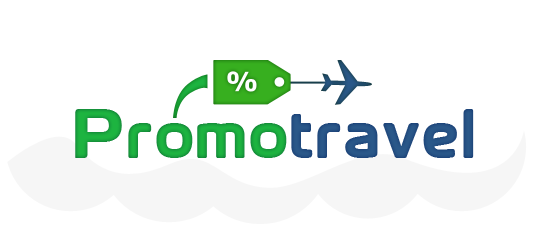
<style>
.page{position:relative;width:548px;height:230px;background:#ffffff}
.page>*{position:absolute;margin:0}
.t1{font:63.5px "SKYfontThick";color:#2a5889}
.t2{font:63.5px "SKYfontThick";color:#1db440}
</style>
<div class="page">
<p class="t1" style="left:75px;top:109px;width:399px;height:49px"><span class="t2">Promo</span>travel</p>
</div>
